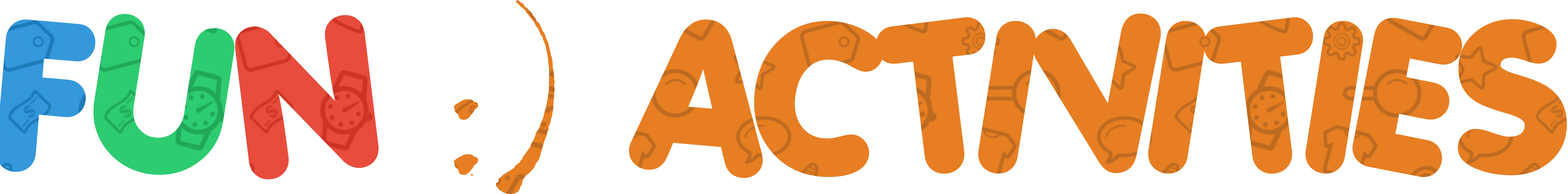
<style>
.page{position:relative;width:1568px;height:194px;background:#ffffff}
.page>*{position:absolute;margin:0}
.t1{font:198.5px "Porkys";letter-spacing:0.02em;color:#e77e23}
.t2{font:198.5px "Chiller-Regular";letter-spacing:0.02em;color:#e77e23}
.t3{font:198.5px "Porkys";letter-spacing:0.02em;color:#2dcc70}
.t4{font:198.5px "Porkys";letter-spacing:0.02em;color:#e84c3d}
</style>
<div class="page">
<p class="t1" style="left:454px;top:0px;width:1113px;height:194px"><span class="t2">:)</span> ACTIVITIES</p>
<p class="t3" style="left:93px;top:14px;width:141px;height:161px">U</p>
<p class="t4" style="left:235px;top:15px;width:144px;height:165px">N</p>
</div>
